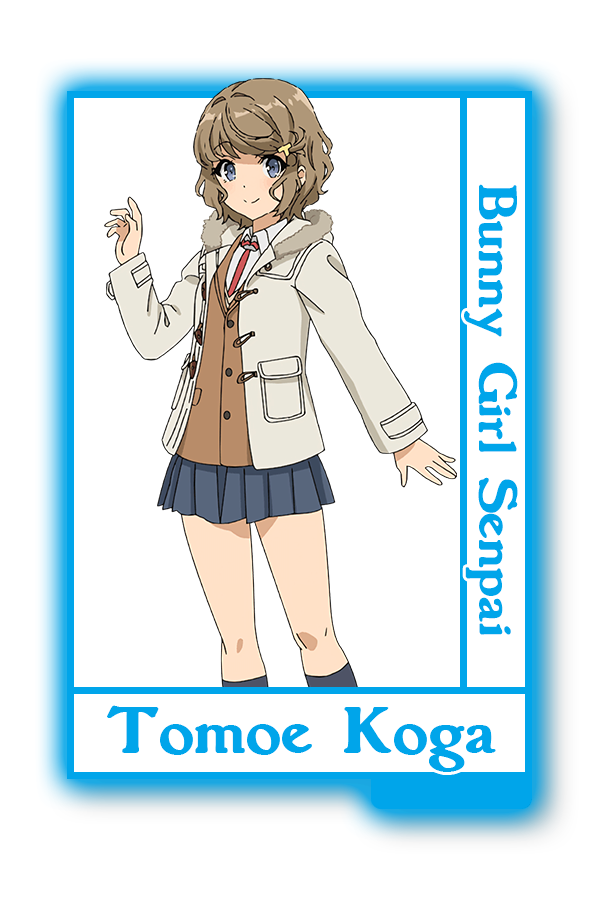
<style>
.page{position:relative;width:600px;height:900px;background:#ffffff}
.page>*{position:absolute;margin:0}
.t1{font:48.8px "Grantham-Bold";color:#0ba3e1}
.t2{font:60.3px "Grantham-Bold";color:#0ba3e1}
</style>
<div class="page">
<p class="t1" style="left:464px;top:184px;width:54px;height:451px;rotate:90deg">Bunny Girl Senpai</p>
<p class="t2" style="left:107px;top:705px;width:389px;height:67px">Tomoe Koga</p>
</div>
